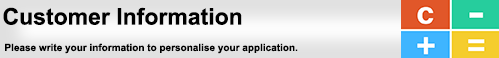
<style>
.page{position:relative;width:499px;height:58px}
.page>*{position:absolute;margin:0}
.t1{font:10px "Arial-BoldMT";color:#000000}
.t2{font:3px "Arial-BoldMT";color:#000000}
.t3{font:23px "Arial-BoldMT";color:#000000}
.t4{font:12px "ArialMT";color:#000000}
</style>
<div class="page">
<p class="t1" style="left:3px;top:7px;width:295px;height:47px"><span class="t2"> </span><span class="t3">Customer Information<br></span><span class="t4"><br></span> Please write your information to personalise your application.</p>
</div>
